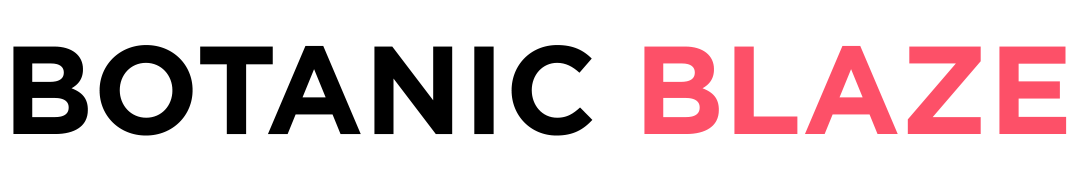
<style>
.page{position:relative;width:1080px;height:180px;background:#ffffff}
.page>*{position:absolute;margin:0}
.t1{font:124.9px "Gotham-Bold";color:#000000}
.t2{font:124.9px "Gotham-Bold";color:#fd5068}
</style>
<div class="page">
<p class="t1" style="left:13px;top:45px;width:1054px;height:91px">BOTANIC <span class="t2">BLAZE</span></p>
</div>
